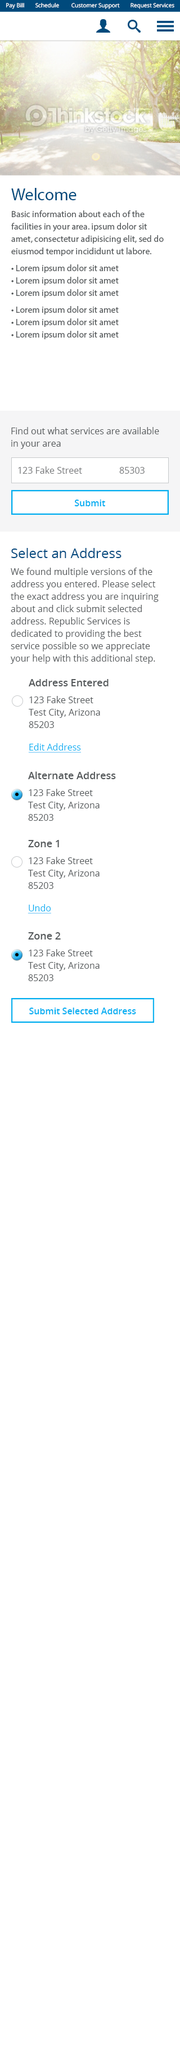
<style>
.page{position:relative;width:180px;height:2045px;background:#ffffff}
.page>*{position:absolute;margin:0}
.t1{font:9px/12.4px "OpenSans";color:#55595b}
.t2{font:16.9px/20.2px "OpenSans";color:#004a7c}
.t3{font:9px/16.9px "OpenSans";color:#55595b}
.t4{font:9px "OpenSans";color:#76787a}
.t5{font:9px "OpenSans-Semibold";color:#00aff2}
.t6{font:13.5px "OpenSans";color:#00497f}
.t7{font:10.1px "OpenSans-Semibold";color:#55595b}
.t8{font:9px/22.5px "OpenSans";color:#00aff2;text-decoration:underline}
</style>
<div class="page">
<p class="t1" style="left:11px;top:188px;width:153px;height:151px"><span class="t2">Welcome<br></span><span class="t3">Basic information about each of the </span>facilities in your area. ipsum dolor sit amet, consectetur adipisicing elit, sed do eiusmod tempor incididunt ut labore.<br><span class="t3">• Lorem ipsum dolor sit amet<br></span>• Lorem ipsum dolor sit amet<br>• Lorem ipsum dolor sit amet<br><span class="t3">• Lorem ipsum dolor sit amet<br></span>• Lorem ipsum dolor sit amet<br>• Lorem ipsum dolor sit amet</p>
<p class="t1" style="left:11px;top:427px;width:148px;height:22px">Find out what services are available in your area</p>
<p class="t4" style="left:18px;top:466px;width:64px;height:8px">123 Fake Street</p>
<p class="t4" style="left:119px;top:467px;width:26px;height:7px">85303</p>
<p class="t5" style="left:74px;top:500px;width:31px;height:6px">Submit</p>
<p class="t1" style="left:11px;top:548px;width:148px;height:116px"><span class="t6">Select an Address<br></span><span class="t3">We found multiple versions of the </span>address you entered. Please select the exact address you are inquiring about and click submit selected address. Republic Services is dedicated to providing the best service possible so we appreciate your help with this additional step.</p>
<p class="t1" style="left:28px;top:679px;width:81px;height:74px"><span class="t7">Address Entered<br></span><span class="t3">123 Fake Street<br></span>Test City, Arizona<br>85203<br><span class="t8">Edit Address</span></p>
<p class="t1" style="left:28px;top:771px;width:88px;height:50px"><span class="t7">Alternate Address<br></span><span class="t3">123 Fake Street<br></span>Test City, Arizona<br>85203</p>
<p class="t1" style="left:28px;top:840px;width:72px;height:74px"><span class="t7">Zone 1<br></span><span class="t3">123 Fake Street<br></span>Test City, Arizona<br>85203<br><span class="t8">Undo</span></p>
<p class="t1" style="left:28px;top:932px;width:72px;height:49px"><span class="t7">Zone 2<br></span><span class="t3">123 Fake Street<br></span>Test City, Arizona<br>85203</p>
<p class="t5" style="left:29px;top:1007px;width:107px;height:7px">Submit Selected Address</p>
</div>
